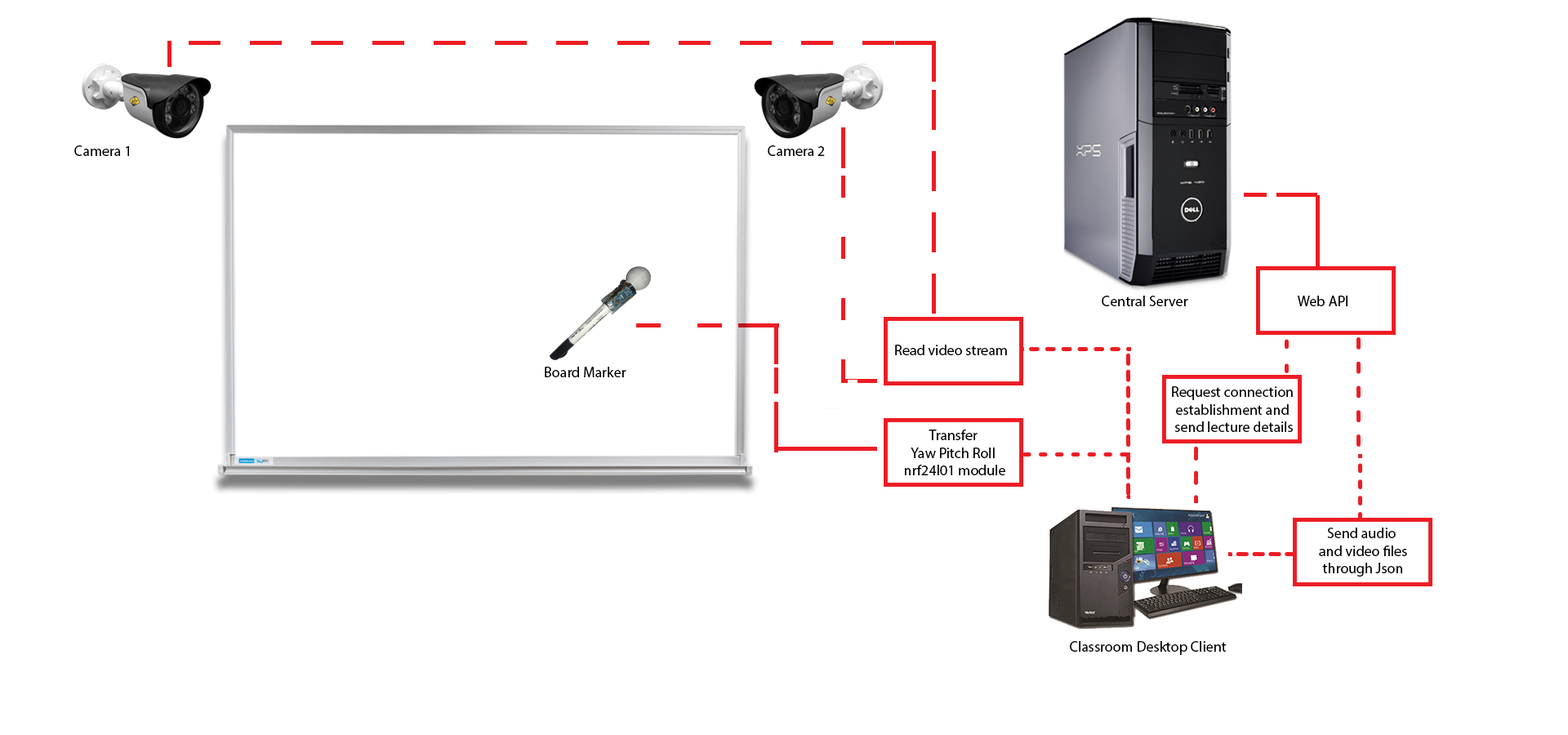
<style>
.page{position:relative;width:1568px;height:735px;background:#ffffff}
.page>*{position:absolute;margin:0}
.t1{font:14.7px "MyriadPro-Regular";color:#000000}
</style>
<div class="page">
<p class="t1" style="left:74px;top:145px;width:55px;height:11px">Camera 1</p>
<p class="t1" style="left:768px;top:145px;width:57px;height:11px">Camera 2</p>
<p class="t1" style="left:1102px;top:296px;width:86px;height:10px">Central Server</p>
<p class="t1" style="left:1298px;top:296px;width:50px;height:10px">Web API</p>
<p class="t1" style="left:895px;top:345px;width:112px;height:10px">Read video stream</p>
<p class="t1" style="left:545px;top:367px;width:81px;height:10px">Board Marker</p>
<p class="t1" style="left:1172px;top:386px;width:121px;height:46px;text-align:center">Request connection <br>establishment and <br>send lecture details</p>
<p class="t1" style="left:905px;top:430px;width:100px;height:45px;text-align:center">Transfer <br>Yaw Pitch Roll <br>nrf24l01 module</p>
<p class="t1" style="left:1319px;top:528px;width:88px;height:49px;text-align:center">Send audio <br>and video files<br>through Json</p>
<p class="t1" style="left:1070px;top:641px;width:157px;height:14px">Classroom Desktop Client</p>
</div>
